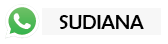
<style>
.page{position:relative;width:168px;height:44px;background:#ffffff}
.page>*{position:absolute;margin:0}
.t1{font:30px "BerlinSansFB-Reg";letter-spacing:-0.005em;color:#000000;font-variant:small-caps}
</style>
<div class="page">
<p class="t1" style="left:59px;top:15px;width:85px;height:14px">sudiana</p>
</div>
